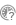
<style>
.page{position:relative;width:16px;height:25px;background:#ffffff}
.page>*{position:absolute;margin:0}
.t1{font:11px "ArialMT";color:#828282}
</style>
<div class="page">
<p class="t1" style="left:9px;top:12px;width:6px;height:8px">?</p>
</div>
